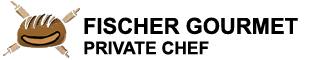
<style>
.page{position:relative;width:319px;height:60px;background:#ffffff}
.page>*{position:absolute;margin:0}
.t1{font:22px "Arial-BoldMT";color:#000000}
.t2{font:17.5px "Arial-BoldMT";color:#000000}
</style>
<div class="page">
<p class="t1" style="left:84px;top:17px;width:214px;height:18px">FISCHER GOURMET</p>
<p class="t2" style="left:84px;top:41px;width:125px;height:14px">PRIVATE CHEF</p>
</div>
